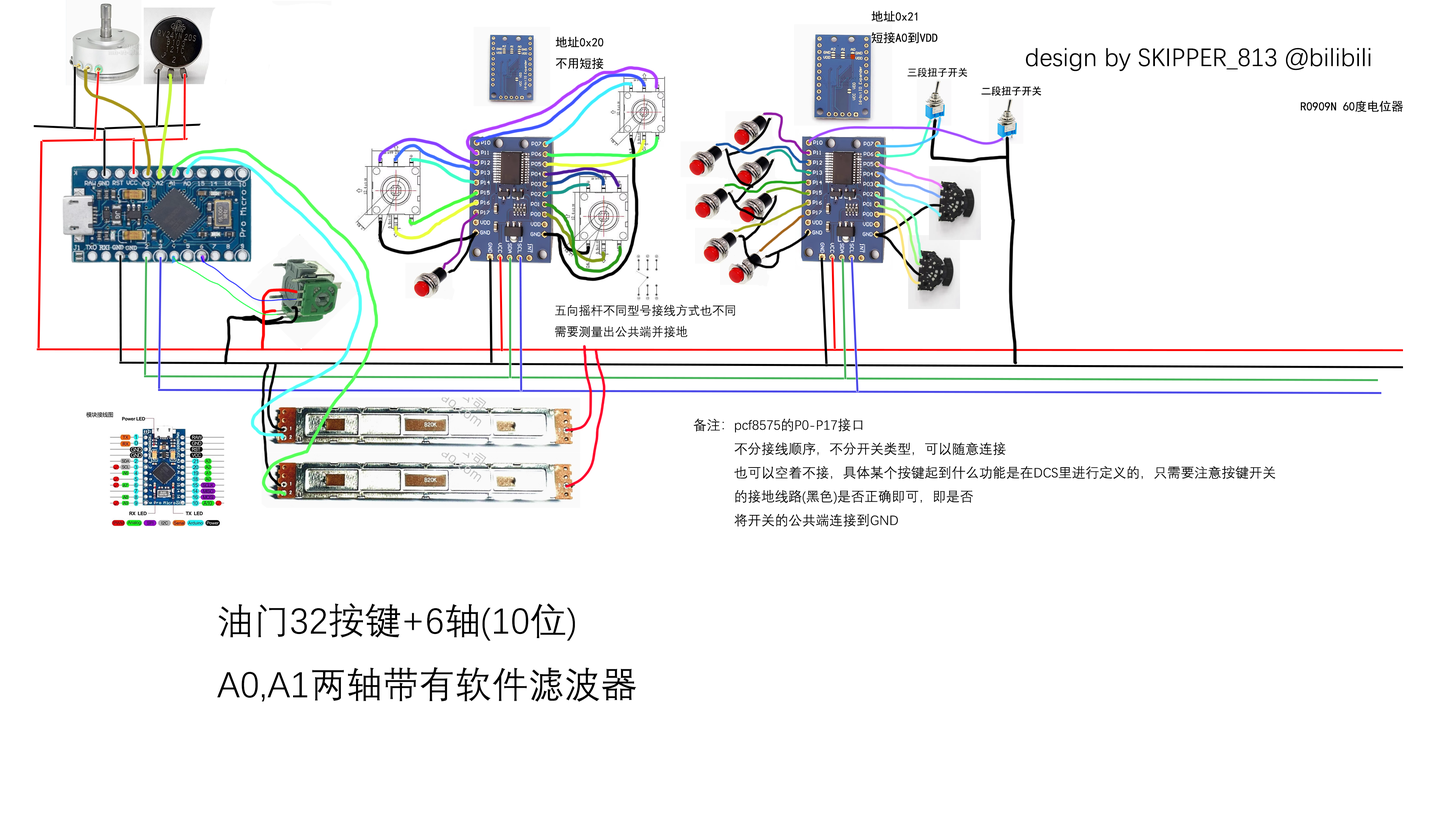
<style>
.page{position:relative;width:1456px;height:819px;background:#ffffff}
.page>*{position:absolute;margin:0}
.t1{font:12.1px "SimHei";color:#000000}
.t2{font:4.5px "SimHei";color:#000000}
.t3{font:25.5px "DengXian";color:#000000}
.t4{font:10.1px "SimHei";color:#000000}
.t5{font:12.1px "DengXian";color:#000000}
.t6{font:13.6px "DengXian";color:#000000}
.t7{font:36.4px "DengXian";color:#000000}
</style>
<div class="page">
<p class="t1" style="left:871px;top:11px;width:67px;height:33px">地址0x21<br>短接A0到VDD</p>
<p class="t2" style="left:555px;top:36px;width:49px;height:33px">地址0x20<br>不用短接</p>
<p class="t3" style="left:1026px;top:48px;width:344px;height:23px">design by SKIPPER_813 @bilibili</p>
<p class="t4" style="left:907px;top:67px;width:60px;height:10px">三段扭子开关</p>
<p class="t1" style="left:1301px;top:100px;width:102px;height:12px">R0909N 60度电位器</p>
<p class="t5" style="left:555px;top:304px;width:180px;height:33px">五向摇杆不同型号接线方式也不同<br>需要测量出公共端并接地</p>
<p class="t6" style="left:693px;top:418px;width:582px;height:109px">备注：pcf8575的P0-P17接口<br>        不分接线顺序，不分开关类型，可以随意连接<br>        也可以空着不接，具体某个按键起到什么功能是在DCS里进行定义的，只需要注意按键开关<br>        的接地线路(黑色)是否正确即可，即是否<br>        将开关的公共端连接到GND</p>
<p class="t7" style="left:217px;top:603px;width:419px;height:99px">油门32按键+6轴(10位)<br>A0,A1两轴带有软件滤波器</p>
</div>
